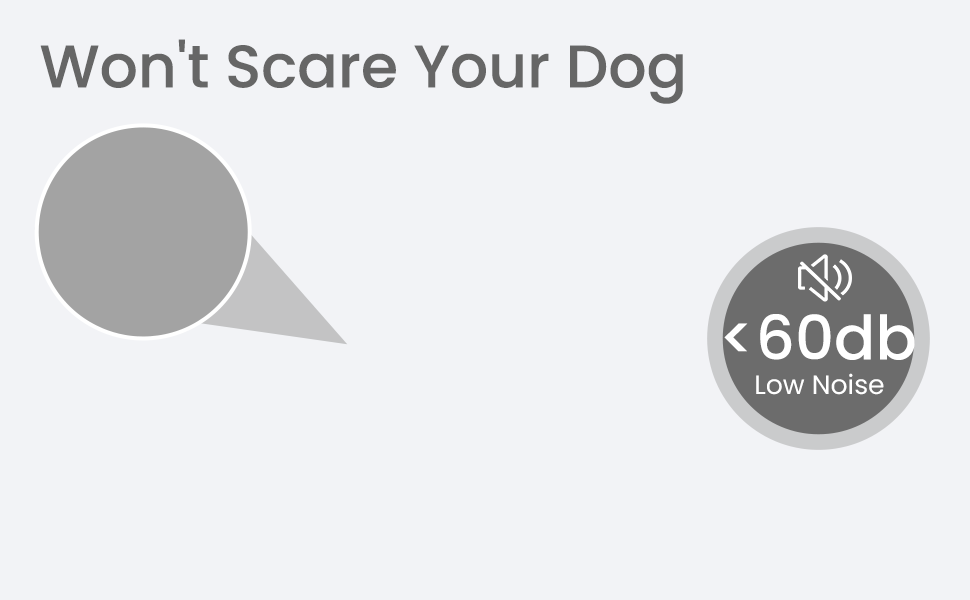
<style>
.page{position:relative;width:970px;height:600px;background:#f2f3f6}
.page>*{position:absolute;margin:0}
.t1{font:60px "Poppins-Medium";color:#666666}
.t2{font:61.1px "Poppins-Medium";color:#ffffff}
.t3{font:26.7px "Poppins-Regular";color:#ffffff}
</style>
<div class="page">
<p class="t1" style="left:40px;top:39px;width:643px;height:65px">Won't Scare Your Dog</p>
<p class="t2" style="left:724px;top:314px;width:191px;height:46px">&lt;60db</p>
<p class="t3" style="left:756px;top:373px;width:128px;height:22px">Low Noise</p>
</div>
